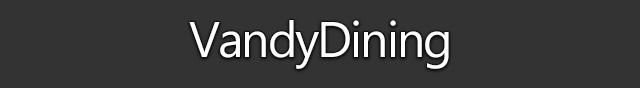
<style>
.page{position:relative;width:640px;height:88px;background:#333333}
.page>*{position:absolute;margin:0}
.t1{font:49.9px "Ebrima";letter-spacing:-0.04em;color:#ffffff}
</style>
<div class="page">
<p class="t1" style="left:189px;top:20px;width:260px;height:49px">VandyDining</p>
</div>
